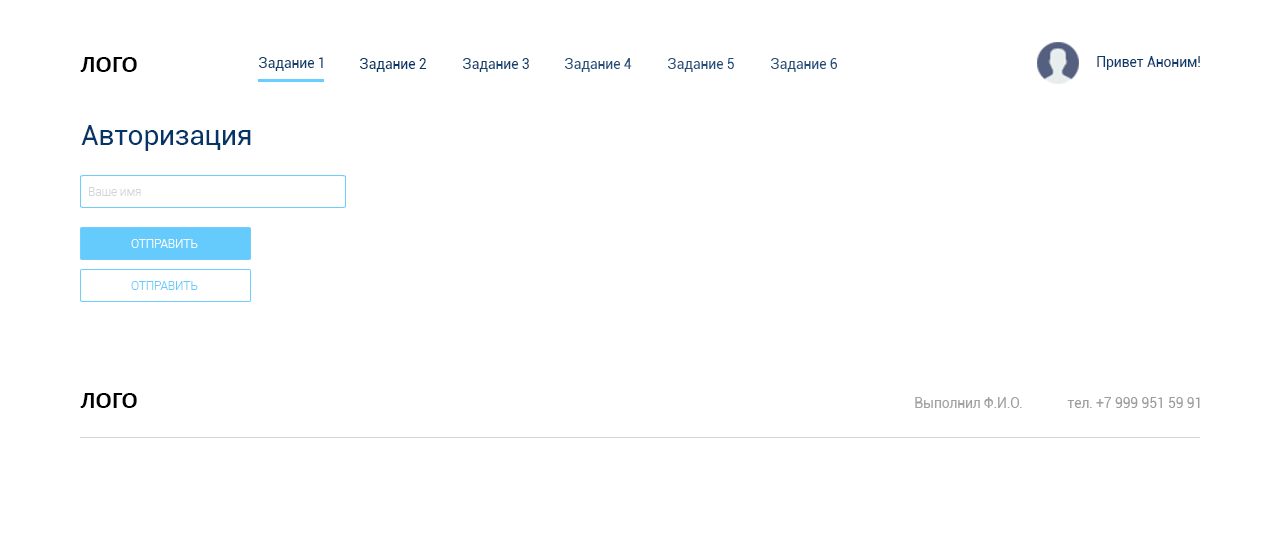
<style>
.page{position:relative;width:1280px;height:534px;background:#ffffff}
.page>*{position:absolute;margin:0}
.t1{font:24px "Calibri-Bold";color:#000002}
.t2{font:14px "Roboto-Regular";letter-spacing:-0.01em;color:#0d3e6e}
.t3{font:14px "Roboto-Regular";letter-spacing:-0.01em;color:#033568}
.t4{font:14px "Roboto-Regular";letter-spacing:-0.01em;color:#124271}
.t5{font:14px "Roboto-Regular";letter-spacing:-0.01em;color:#224e7a}
.t6{font:14px "Roboto-Regular";letter-spacing:-0.01em;color:#0a3b6c}
.t7{font:28px "Roboto-Regular";letter-spacing:-0.01em;color:#033568}
.t8{font:12px "Roboto-Light";letter-spacing:-0.01em;color:#d2d4d6}
.t9{font:12px "Roboto-Light";letter-spacing:-0.01em;color:#ffffff;text-transform:uppercase}
.t10{font:12px "Roboto-Light";letter-spacing:-0.01em;color:#65cafc;text-transform:uppercase}
.t11{font:14px "Roboto-Regular";letter-spacing:-0.01em;color:#a2a1a1}
.t12{font:14px "Roboto-Regular";letter-spacing:-0.01em;color:#9e9d9d}
</style>
<div class="page">
<p class="t1" style="left:80px;top:57px;width:57px;height:15px">ЛОГО</p>
<p class="t2" style="left:259px;top:57px;width:64px;height:14px">Задание 1</p>
<p class="t3" style="left:360px;top:58px;width:67px;height:14px">Задание 2</p>
<p class="t4" style="left:463px;top:58px;width:66px;height:14px">Задание 3</p>
<p class="t5" style="left:565px;top:58px;width:67px;height:14px">Задание 4</p>
<p class="t5" style="left:668px;top:58px;width:66px;height:14px">Задание 5</p>
<p class="t5" style="left:771px;top:58px;width:67px;height:14px">Задание 6</p>
<p class="t6" style="left:1097px;top:56px;width:103px;height:14px">Привет Аноним!</p>
<p class="t7" style="left:81px;top:125px;width:170px;height:26px">Авторизация</p>
<p class="t8" style="left:89px;top:187px;width:52px;height:9px">Ваше имя</p>
<p class="t9" style="left:131px;top:239px;width:67px;height:9px">Отправить</p>
<p class="t10" style="left:131px;top:281px;width:67px;height:9px">Отправить</p>
<p class="t1" style="left:80px;top:393px;width:57px;height:15px">ЛОГО</p>
<p class="t11" style="left:915px;top:397px;width:107px;height:11px">Выполнил Ф.И.О.</p>
<p class="t12" style="left:1067px;top:397px;width:133px;height:11px">тел. +7 999 951 59 91</p>
</div>
